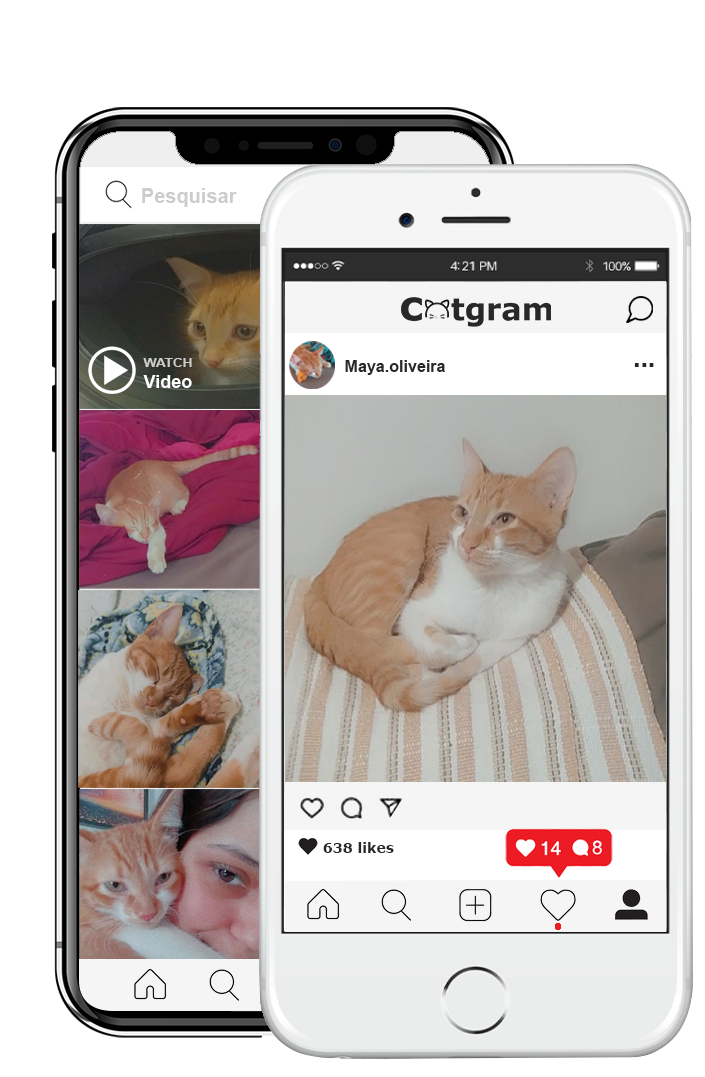
<style>
.page{position:relative;width:705px;height:1077px;background:#ffffff}
.page>*{position:absolute;margin:0}
.t1{font:20px "Arial-BoldMT";color:#cccccc}
.t2{font:12px "Arial-BoldMT";color:#cccccc;scale:1.13 1}
.t3{font:16.1px "Arial-BoldMT";color:#282828}
.t4{font:20.6px "Verdana-Bold";color:#282828}
.t5{font:18px "Arial-BoldMT";color:#ffffff}
.t6{font:14px "Verdana-Bold";color:#282828}
</style>
<div class="page">
<p class="t1" style="left:142px;top:188px;width:95px;height:19px">Pesquisar</p>
<p class="t2" style="left:143px;top:358px;width:49px;height:9px">WATCH</p>
<p class="t3" style="left:345px;top:360px;width:100px;height:15px">Maya.oliveira</p>
<p class="t4" style="left:634px;top:363px;width:20px;height:4px">...</p>
<p class="t5" style="left:143px;top:375px;width:49px;height:13px">Video</p>
<p class="t6" style="left:323px;top:842px;width:71px;height:11px">638 likes</p>
</div>
